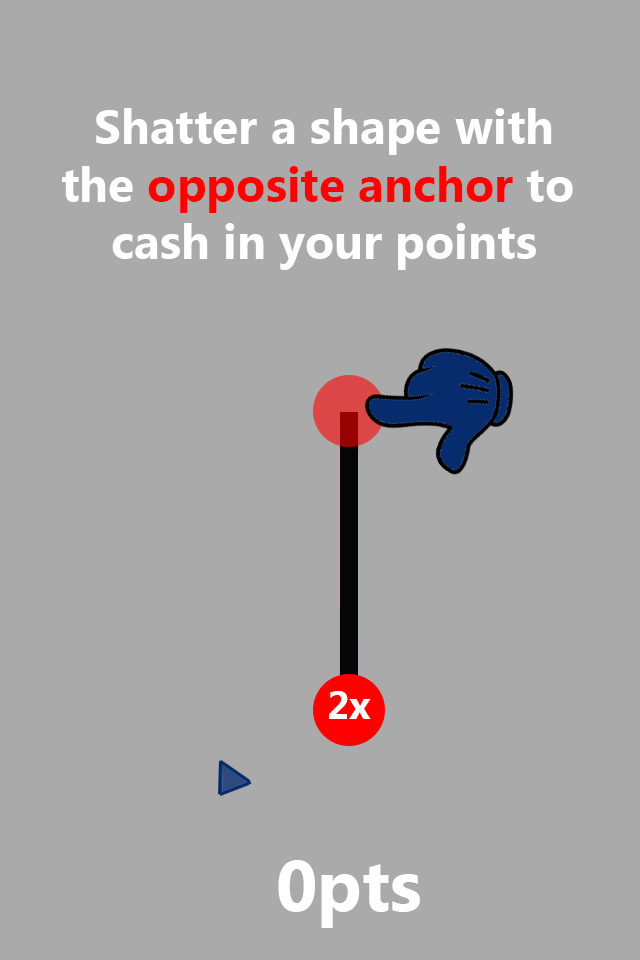
<style>
.page{position:relative;width:640px;height:960px;background:#aaaaaa}
.page>*{position:absolute;margin:0}
.t1{font:48px "LaoUI-Bold";color:#ffffff}
.t2{font:48px "LaoUI-Bold";color:#ff0101}
.t3{font:39.2px "LaoUI-Bold";color:#ffffff}
.t4{font:72px "LaoUI-Bold";color:#ffffff}
</style>
<div class="page">
<p class="t1" style="left:62px;top:108px;width:511px;height:162px;text-align:center">Shatter a shape with<br>the <span class="t2">opposite anchor</span> to <br>cash in your points</p>
<p class="t3" style="left:329px;top:691px;width:42px;height:28px">2x</p>
<p class="t4" style="left:278px;top:860px;width:142px;height:68px">0pts</p>
</div>
